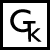
<style>
.page{position:relative;width:50px;height:50px;background:#ffffff}
.page>*{position:absolute;margin:0}
.t1{font:32.7px "Humanist521BT-Roman";color:#000000}
.t2{font:26.6px "Humanist521BT-Roman";color:#000000;scale:0.75 1}
.t3{font:19.3px "Humanist521BT-Roman";color:#040404;scale:1.18 1}
</style>
<div class="page">
<p class="t1" style="left:10px;top:9px;width:21px;height:24px">G</p>
<p class="t2" style="left:23px;top:21px;width:13px;height:19px">T</p>
<p class="t3" style="left:28px;top:28px;width:14px;height:14px">K</p>
</div>
